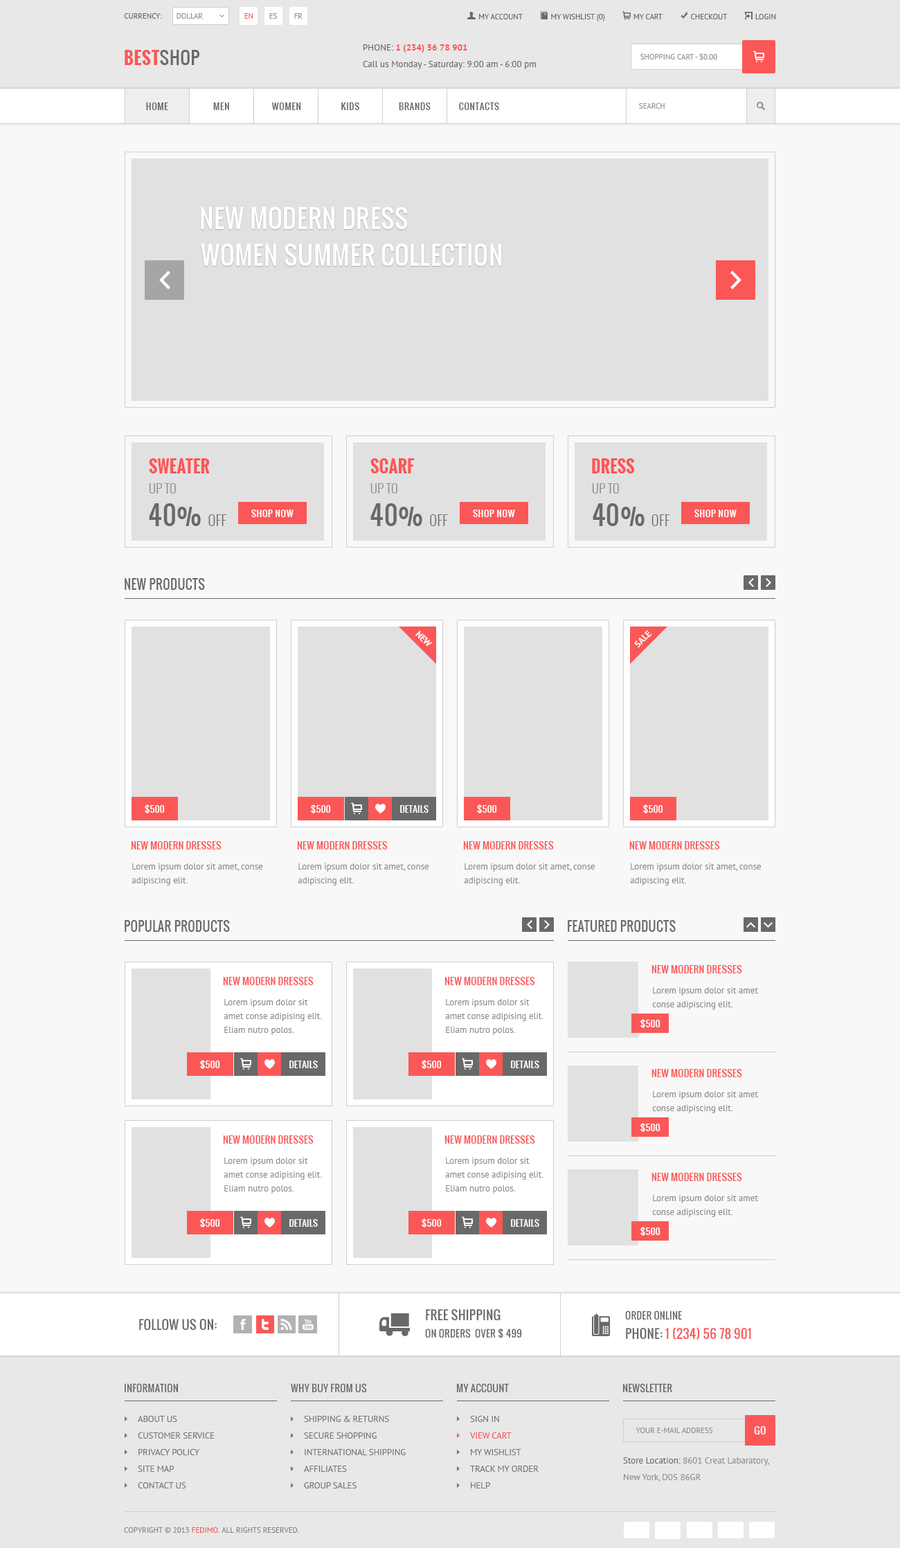
<style>
.page{position:relative;width:900px;height:1548px;background:#f8f8f8}
.page>*{position:absolute;margin:0}
.t1{font:7.6px "PTSans-Regular";color:#696969;text-transform:uppercase}
.t2{font:7.6px "PTSans-Regular";color:#939393;text-transform:uppercase}
.t3{font:7.6px "PTSans-Regular";color:#fb5757;text-transform:uppercase}
.t4{font:17.3px "Oswald-Bold";letter-spacing:0.025em;color:#fb5757;text-transform:uppercase}
.t5{font:17.3px "Oswald-Regular";letter-spacing:0.025em;color:#696969;text-transform:uppercase}
.t6{font:9px/16.6px "PTSans-Regular";color:#696969}
.t7{font:9px/16.6px "PTSans-Regular";color:#696969;text-transform:uppercase}
.t8{font:9px/16.6px "PTSans-Bold";color:#fb5757;text-transform:uppercase}
.t9{font:9px "Oswald-Regular";letter-spacing:0.05em;color:#696969;text-transform:uppercase}
.t10{font:24.9px "Oswald-Regular";letter-spacing:0.025em;color:#ffffff;text-transform:uppercase}
.t11{font:16.6px "Oswald-Bold";letter-spacing:0.015em;color:#fb5757;text-transform:uppercase}
.t12{font:12.5px "Oswald-Light";letter-spacing:0.025em;color:#8b8b8b;text-transform:uppercase}
.t13{font:25.8px "Oswald-Regular";letter-spacing:0.025em;color:#696969;text-transform:uppercase}
.t14{font:14.1px "Oswald-Light";letter-spacing:0.025em;color:#696969;text-transform:uppercase}
.t15{font:9px "Oswald-Regular";letter-spacing:0.05em;color:#ffffff;text-transform:uppercase}
.t16{font:12.5px "Oswald-Regular";letter-spacing:0.015em;color:#696969;text-transform:uppercase}
.t17{font:9px "PTSans-Bold";color:#ffffff;text-transform:uppercase}
.t18{font:9px "Oswald-Regular";letter-spacing:0.015em;color:#ffffff;text-transform:uppercase}
.t19{font:9.7px "Oswald-Regular";letter-spacing:0.015em;color:#fb5757;text-transform:uppercase}
.t20{font:9px/13.8px "PTSans-Regular";color:#8b8b8b}
.t21{font:9.7px/17.3px "Oswald-Regular";letter-spacing:0.015em;color:#696969;text-transform:uppercase}
.t22{font:12.5px/19.4px "Oswald-Regular";letter-spacing:0.015em;color:#fb5757;text-transform:uppercase}
.t23{font:9.7px "Oswald-Regular";letter-spacing:0.015em;color:#696969;text-transform:uppercase}
.t24{font:12.5px/19.4px "Oswald-Regular";letter-spacing:0.015em;color:#696969;text-transform:uppercase}
.t25{font:9px/16.6px "PTSans-Regular";color:#767676;text-transform:uppercase}
.t26{font:9px/16.6px "PTSans-Regular";color:#fb5757;text-transform:uppercase}
.t27{font:9.7px "Oswald-Regular";letter-spacing:0.05em;color:#ffffff;text-transform:uppercase}
.t28{font:9px/16.6px "PTSans-Regular";color:#8f8f8f}
.t29{font:7.6px "PTSans-Regular";color:#888888;text-transform:uppercase}
</style>
<div class="page">
<p class="t1" style="left:124px;top:13px;width:38px;height:6px">Currency:</p>
<p class="t2" style="left:177px;top:13px;width:26px;height:6px">Dollar</p>
<p class="t3" style="left:244px;top:13px;width:9px;height:6px">En</p>
<p class="t2" style="left:269px;top:13px;width:8px;height:6px">Es</p>
<p class="t2" style="left:294px;top:13px;width:9px;height:6px">Fr</p>
<p class="t1" style="left:479px;top:14px;width:297px;height:7px">My Account              My Wishlist (0)              My Cart              Checkout              Login</p>
<p class="t4" style="left:125px;top:50px;width:74px;height:15px">Best<span class="t5">Shop</span></p>
<p class="t6" style="left:363px;top:44px;width:173px;height:25px"><span class="t7">Phone: </span><span class="t8">1 (234) 56 78 901<br></span>Call us Monday - Saturday: 9:00 am - 6:00 pm</p>
<p class="t2" style="left:640px;top:53px;width:77px;height:7px">Shopping Cart - $0.00</p>
<p class="t9" style="left:146px;top:102px;width:22px;height:8px">Home</p>
<p class="t9" style="left:213px;top:102px;width:16px;height:8px">Men</p>
<p class="t9" style="left:271px;top:102px;width:30px;height:8px">Women</p>
<p class="t9" style="left:341px;top:102px;width:18px;height:8px">Kids</p>
<p class="t9" style="left:399px;top:102px;width:32px;height:8px">Brands</p>
<p class="t9" style="left:459px;top:102px;width:40px;height:8px">Contacts</p>
<p class="t2" style="left:639px;top:103px;width:26px;height:6px">Search</p>
<p class="t10" style="left:201px;top:207px;width:207px;height:22px">New Modern Dress</p>
<p class="t10" style="left:201px;top:244px;width:300px;height:22px">Women Summer Collection</p>
<p class="t11" style="left:149px;top:458px;width:61px;height:16px">Sweater</p>
<p class="t11" style="left:370px;top:458px;width:45px;height:16px">Scarf</p>
<p class="t11" style="left:592px;top:458px;width:43px;height:16px">Dress</p>
<p class="t12" style="left:149px;top:483px;width:27px;height:11px">Up to</p>
<p class="t12" style="left:370px;top:483px;width:27px;height:11px">Up to</p>
<p class="t12" style="left:592px;top:483px;width:27px;height:11px">Up to</p>
<p class="t13" style="left:149px;top:503px;width:77px;height:23px">40% <span class="t14">Off</span></p>
<p class="t15" style="left:251px;top:510px;width:43px;height:7px">Shop Now</p>
<p class="t13" style="left:370px;top:503px;width:78px;height:23px">40% <span class="t14">Off</span></p>
<p class="t15" style="left:473px;top:510px;width:42px;height:7px">Shop Now</p>
<p class="t13" style="left:593px;top:503px;width:77px;height:23px">40% <span class="t14">Off</span></p>
<p class="t15" style="left:694px;top:510px;width:43px;height:7px">Shop Now</p>
<p class="t16" style="left:125px;top:578px;width:80px;height:12px">New Products</p>
<p class="t17" style="left:634px;top:630px;width:18px;height:18px;rotate:-45deg">sale</p>
<p class="t17" style="left:415px;top:631px;width:18px;height:16px;rotate:45deg">New</p>
<p class="t18" style="left:145px;top:804px;width:20px;height:9px">$500</p>
<p class="t18" style="left:311px;top:804px;width:20px;height:9px">$500</p>
<p class="t18" style="left:400px;top:805px;width:29px;height:8px">Details</p>
<p class="t18" style="left:477px;top:804px;width:20px;height:9px">$500</p>
<p class="t18" style="left:643px;top:804px;width:20px;height:9px">$500</p>
<p class="t19" style="left:131px;top:841px;width:91px;height:8px">New Modern Dresses</p>
<p class="t19" style="left:297px;top:841px;width:91px;height:8px">New Modern Dresses</p>
<p class="t19" style="left:463px;top:841px;width:91px;height:8px">New Modern Dresses</p>
<p class="t19" style="left:629px;top:841px;width:91px;height:8px">New Modern Dresses</p>
<p class="t20" style="left:132px;top:863px;width:131px;height:22px">Lorem ipsum dolor sit amet, conse<br>adipiscing elit.</p>
<p class="t20" style="left:298px;top:863px;width:131px;height:22px">Lorem ipsum dolor sit amet, conse<br>adipiscing elit.</p>
<p class="t20" style="left:464px;top:863px;width:131px;height:22px">Lorem ipsum dolor sit amet, conse<br>adipiscing elit.</p>
<p class="t20" style="left:630px;top:863px;width:132px;height:22px">Lorem ipsum dolor sit amet, conse<br>adipiscing elit.</p>
<p class="t16" style="left:125px;top:920px;width:105px;height:12px">Popular Products</p>
<p class="t16" style="left:568px;top:920px;width:108px;height:12px">Featured Products</p>
<p class="t19" style="left:651px;top:965px;width:91px;height:8px">New Modern Dresses</p>
<p class="t19" style="left:223px;top:977px;width:91px;height:8px">New Modern Dresses</p>
<p class="t19" style="left:444px;top:977px;width:91px;height:8px">New Modern Dresses</p>
<p class="t20" style="left:652px;top:987px;width:106px;height:22px">Lorem ipsum dolor sit amet <br>conse adipiscing elit.</p>
<p class="t20" style="left:224px;top:999px;width:98px;height:36px">Lorem ipsum dolor sit amet conse adipising elit. Eliam nutro polos.</p>
<p class="t20" style="left:445px;top:999px;width:98px;height:36px">Lorem ipsum dolor sit amet conse adipising elit. Eliam nutro polos.</p>
<p class="t18" style="left:640px;top:1019px;width:20px;height:9px">$500</p>
<p class="t18" style="left:200px;top:1060px;width:20px;height:9px">$500</p>
<p class="t18" style="left:289px;top:1061px;width:29px;height:7px">Details</p>
<p class="t18" style="left:422px;top:1060px;width:20px;height:9px">$500</p>
<p class="t18" style="left:511px;top:1061px;width:28px;height:7px">Details</p>
<p class="t19" style="left:651px;top:1069px;width:91px;height:8px">New Modern Dresses</p>
<p class="t20" style="left:652px;top:1091px;width:106px;height:22px">Lorem ipsum dolor sit amet <br>conse adipiscing elit.</p>
<p class="t18" style="left:640px;top:1123px;width:20px;height:9px">$500</p>
<p class="t19" style="left:223px;top:1135px;width:91px;height:9px">New Modern Dresses</p>
<p class="t19" style="left:444px;top:1135px;width:91px;height:9px">New Modern Dresses</p>
<p class="t20" style="left:224px;top:1158px;width:98px;height:36px">Lorem ipsum dolor sit amet conse adipising elit. Eliam nutro polos.</p>
<p class="t20" style="left:445px;top:1158px;width:98px;height:36px">Lorem ipsum dolor sit amet conse adipising elit. Eliam nutro polos.</p>
<p class="t19" style="left:651px;top:1173px;width:91px;height:8px">New Modern Dresses</p>
<p class="t20" style="left:652px;top:1195px;width:106px;height:22px">Lorem ipsum dolor sit amet <br>conse adipiscing elit.</p>
<p class="t18" style="left:200px;top:1218px;width:20px;height:9px">$500</p>
<p class="t18" style="left:289px;top:1219px;width:29px;height:8px">Details</p>
<p class="t18" style="left:422px;top:1218px;width:20px;height:9px">$500</p>
<p class="t18" style="left:511px;top:1219px;width:28px;height:8px">Details</p>
<p class="t18" style="left:640px;top:1227px;width:20px;height:9px">$500</p>
<p class="t21" style="left:425px;top:1309px;width:97px;height:29px"><span class="t16">Free Shipping<br></span>On Orders  Over $ 499</p>
<p class="t22" style="left:625px;top:1311px;width:126px;height:29px"><span class="t23">Order Online<br></span><span class="t24">Phone: </span>1 (234) 56 78 901</p>
<p class="t16" style="left:139px;top:1319px;width:78px;height:12px">Follow Us On:</p>
<p class="t23" style="left:125px;top:1383px;width:53px;height:9px">Information</p>
<p class="t23" style="left:291px;top:1383px;width:76px;height:9px">Why Buy From Us</p>
<p class="t23" style="left:457px;top:1383px;width:52px;height:9px">My Account</p>
<p class="t23" style="left:623px;top:1383px;width:49px;height:9px">Newsletter</p>
<p class="t25" style="left:138px;top:1416px;width:77px;height:72px">About Us<br>Customer Service<br>Privacy Policy<br>Site Map<br>Contact Us</p>
<p class="t25" style="left:304px;top:1416px;width:102px;height:72px">Shipping &amp; Returns<br>Secure Shopping<br>International Shipping<br>Affiliates<br>Group Sales</p>
<p class="t25" style="left:469px;top:1416px;width:70px;height:72px">Sign In<br><span class="t26">View Cart<br></span>My Wishlist<br>Track My Order<br>Help</p>
<p class="t2" style="left:636px;top:1428px;width:77px;height:5px">Your E-mail address</p>
<p class="t27" style="left:754px;top:1426px;width:12px;height:8px">Go</p>
<p class="t28" style="left:623px;top:1457px;width:146px;height:25px"><span class="t6">Store Location:</span> 8601 Creat Labaratory, <br>New York, D05 86GR</p>
<p class="t29" style="left:124px;top:1527px;width:175px;height:6px">Copyright © 2013 <span class="t3">Fedimo</span>. All rights reserved.</p>
</div>
